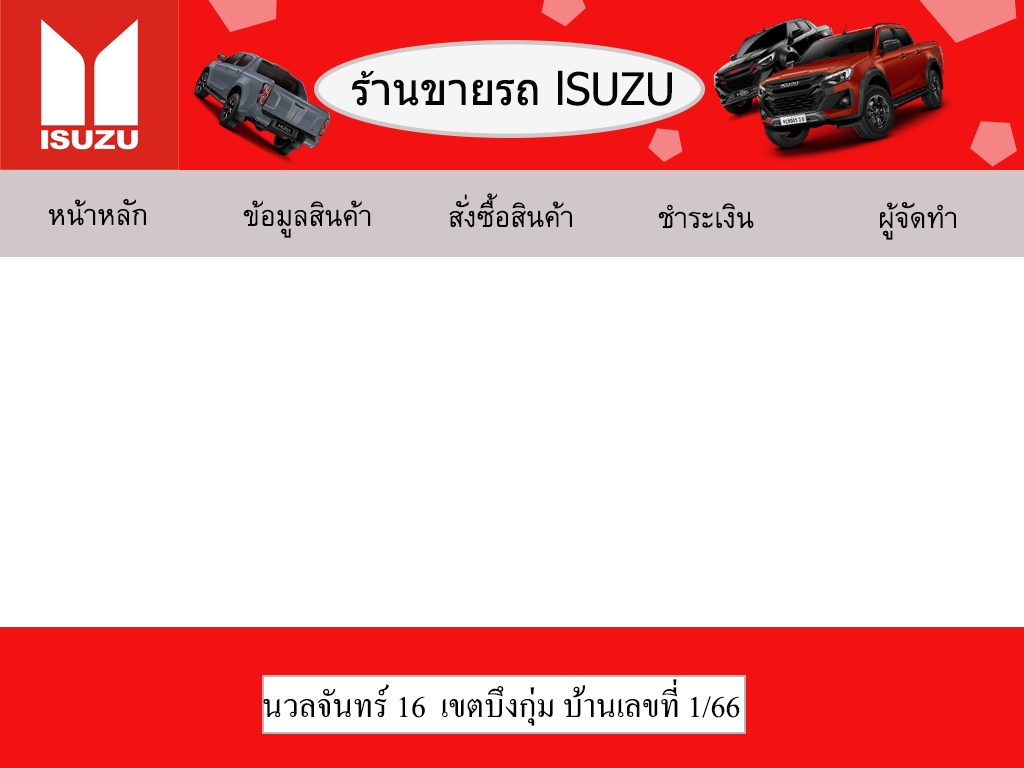
<style>
.page{position:relative;width:1024px;height:768px;background:#ffffff}
.page>*{position:absolute;margin:0}
.t1{font:45px "Tahoma";color:#050505}
.t2{font:40px "BrowalliaNew";color:#050505}
.t3{font:45px "AngsanaNew";color:#040404}
</style>
<div class="page">
<p class="t1" style="left:352px;top:70px;width:320px;height:36px">ร้านขายรถ lSUZU</p>
<p class="t2" style="left:449px;top:193px;width:123px;height:35px">สั่งซื้อสินค้า</p>
<p class="t2" style="left:48px;top:199px;width:98px;height:27px">หน้าหลัก</p>
<p class="t2" style="left:243px;top:200px;width:128px;height:38px">ข้อมูลสินค้า</p>
<p class="t2" style="left:658px;top:203px;width:96px;height:26px">ชำระเงิน</p>
<p class="t2" style="left:880px;top:202px;width:76px;height:38px">ผู้จัดทำ</p>
<p class="t3" style="left:263px;top:679px;width:477px;height:47px">นวลจันทร์ 16  เขตบึงกุ่ม บ้านเลขที่ 1/66</p>
</div>
